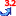
<style>
.page{position:relative;width:16px;height:16px;background:#ffffff}
.page>*{position:absolute;margin:0}
.t1{font:8px "Verdana-Bold";letter-spacing:-0.1em;color:#ff0000;scale:0.9 1}
</style>
<div class="page">
<p class="t1" style="left:4px;top:0px;width:12px;height:7px">3.2</p>
</div>
